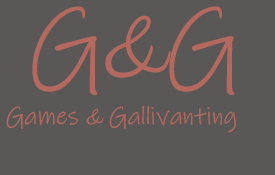
<style>
.page{position:relative;width:275px;height:175px;background:#5a5757}
.page>*{position:absolute;margin:0}
.t1{font:100px "InkFree";color:#b5695e}
.t2{font:25px "InkFree";color:#b5695e}
</style>
<div class="page">
<p class="t1" style="left:32px;top:6px;width:203px;height:89px">G&amp;G</p>
<p class="t2" style="left:6px;top:106px;width:231px;height:27px">Games &amp; Gallivanting</p>
</div>
